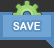
<style>
.page{position:relative;width:54px;height:48px;background:#333333}
.page>*{position:absolute;margin:0}
.t1{font:10.5px "ArialRoundedMTBold";letter-spacing:0.02em;color:#ffffff;scale:0.95 1}
</style>
<div class="page">
<p class="t1" style="left:13px;top:22px;width:28px;height:8px">SAVE</p>
</div>
